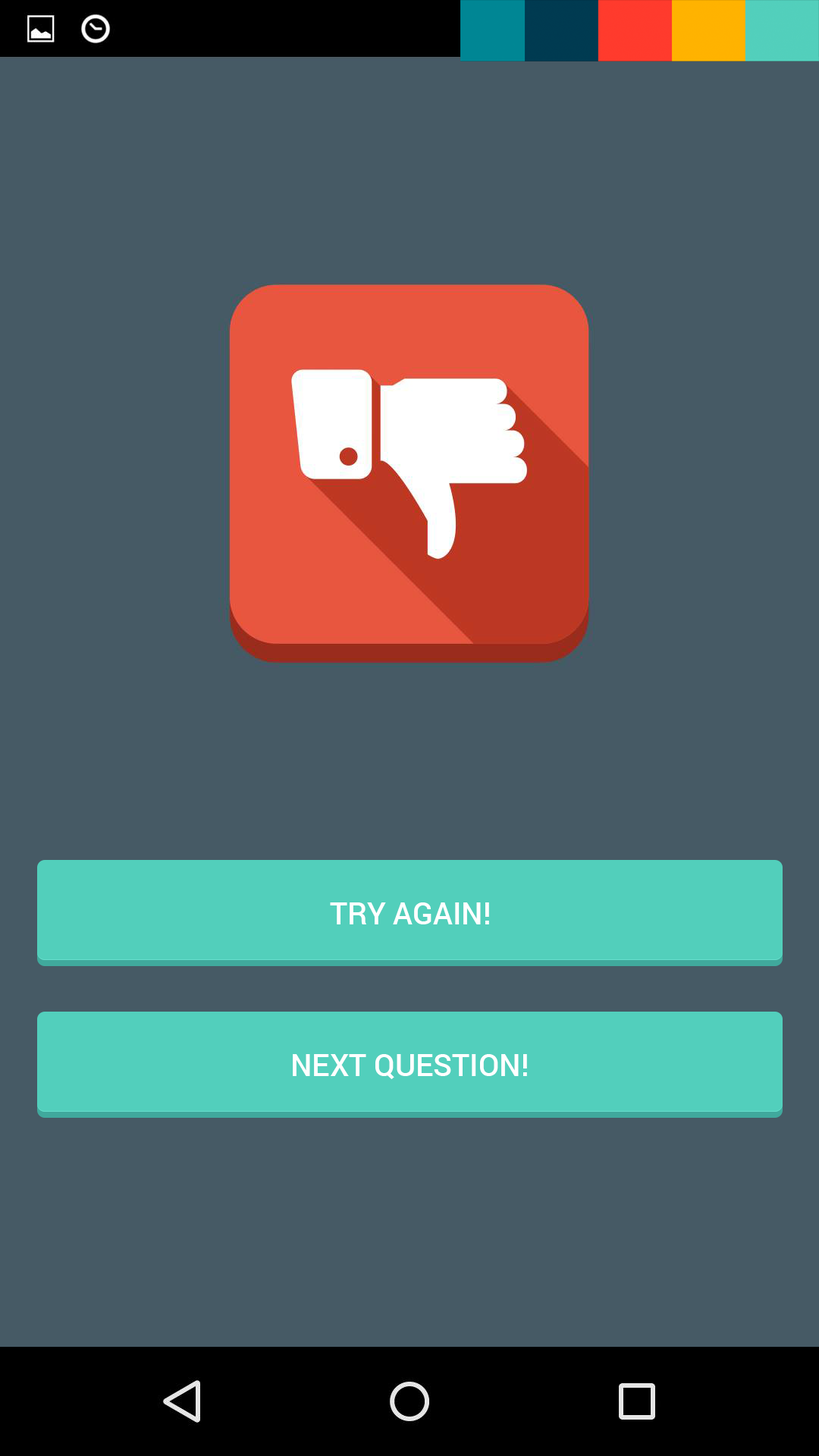
<style>
.page{position:relative;width:819px;height:1456px;background:#465a65}
.page>*{position:absolute;margin:0}
.t1{font:30.3px "Roboto-Medium";color:#ffffff}
</style>
<div class="page">
<p class="t1" style="left:330px;top:902px;width:159px;height:22px">TRY AGAIN!</p>
<p class="t1" style="left:293px;top:1054px;width:234px;height:25px">NEXT QUESTION!</p>
</div>
